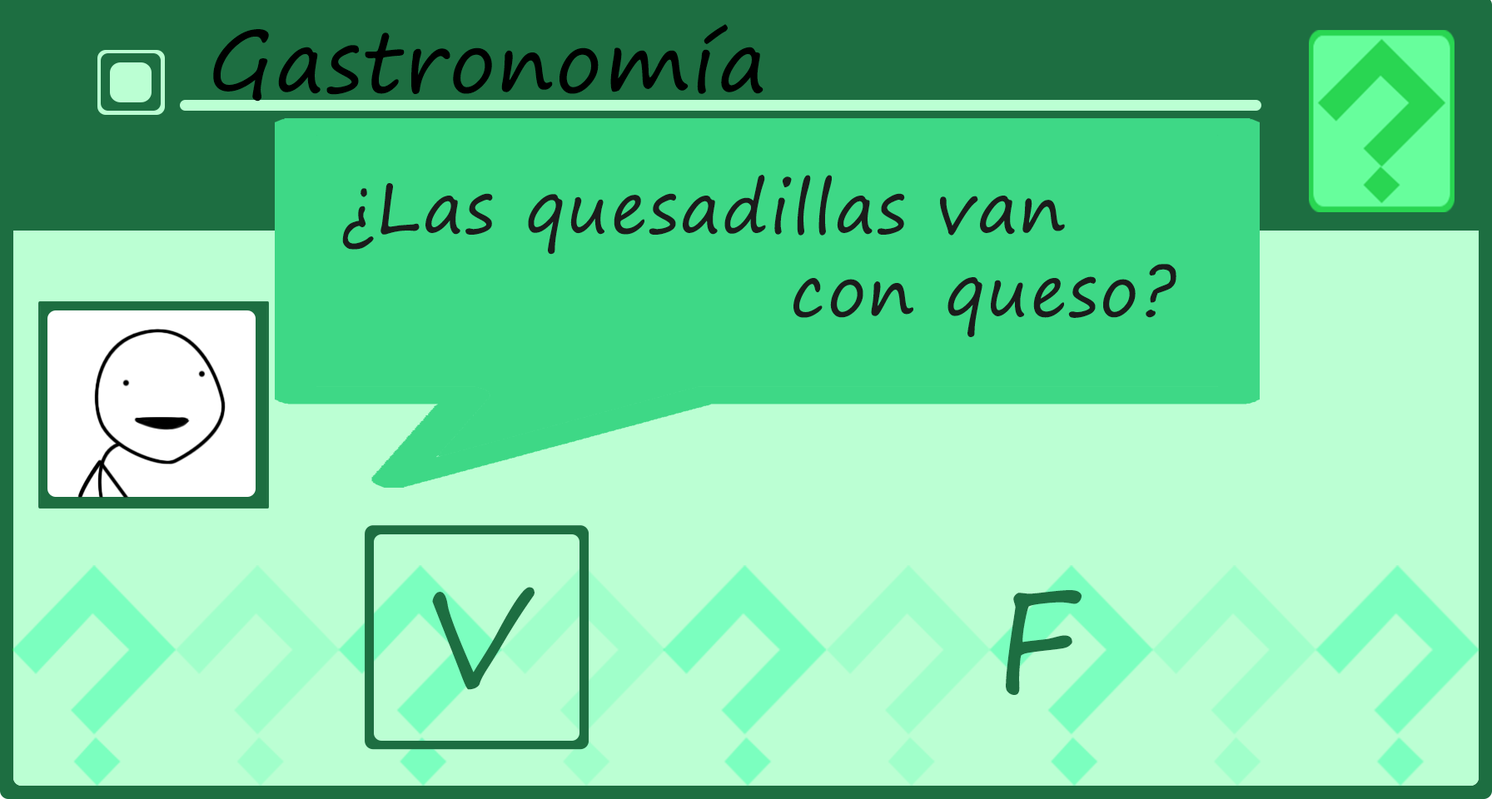
<style>
.page{position:relative;width:1492px;height:799px;background:#bbffd3}
.page>*{position:absolute;margin:0}
.t1{font:83.1px "SegoePrint";letter-spacing:0.025em;color:#000000}
.t2{font:69.3px "SegoePrint";letter-spacing:0.025em;color:#1b1b1b}
.t3{font:138.5px "SegoePrint";letter-spacing:0.025em;color:#1d6e41}
</style>
<div class="page">
<p class="t1" style="left:213px;top:24px;width:550px;height:78px">Gastronomía</p>
<p class="t2" style="left:342px;top:175px;width:834px;height:162px">¿Las quesadillas van<br>               con queso?</p>
<p class="t3" style="left:432px;top:587px;width:102px;height:103px">V</p>
<p class="t3" style="left:1006px;top:590px;width:75px;height:105px">F</p>
</div>
